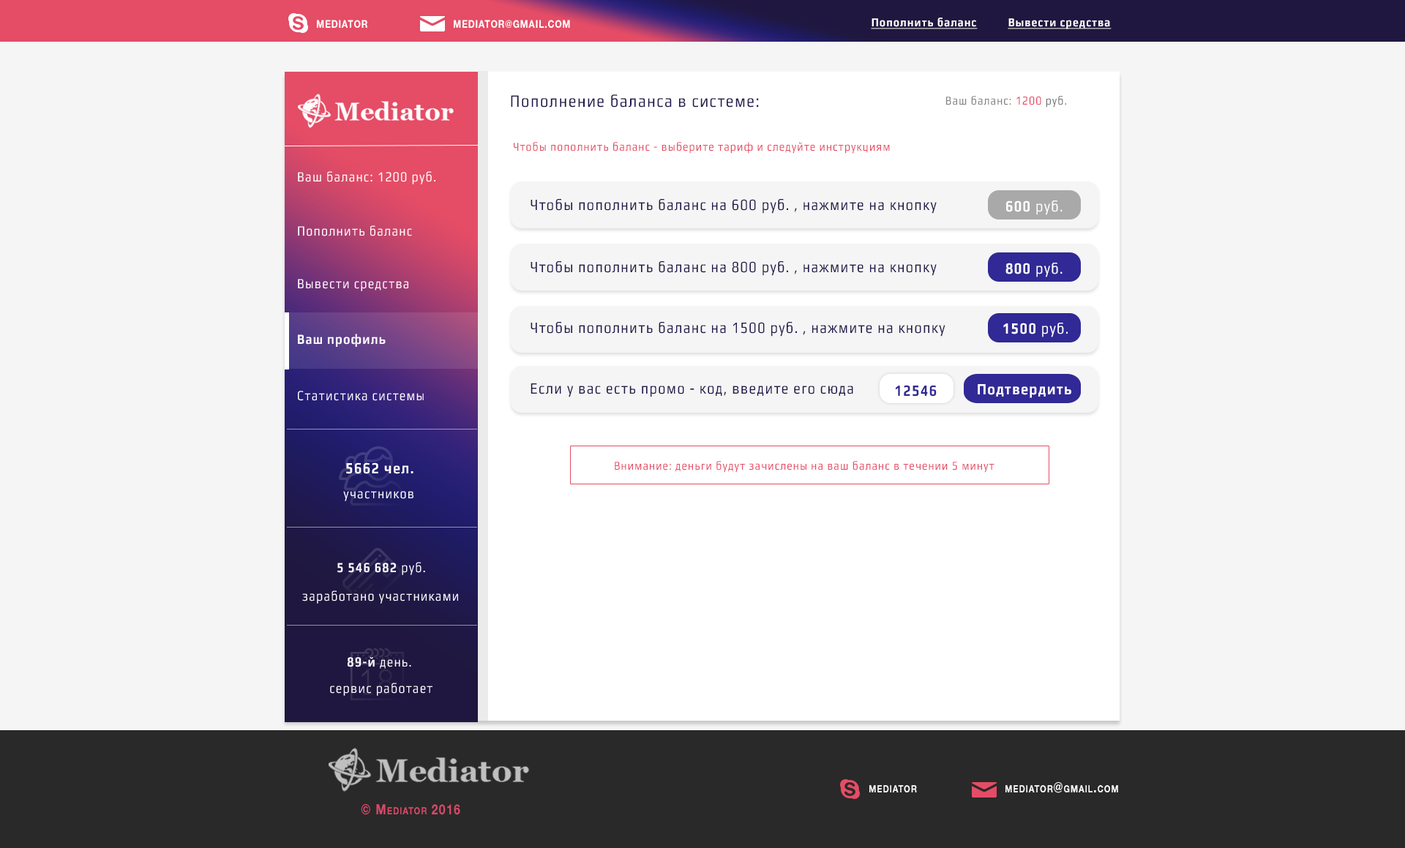
<style>
.page{position:relative;width:1405px;height:848px;background:#f5f5f5}
.page>*{position:absolute;margin:0}
.t1{font:12.3px "Play-Bold";letter-spacing:0.075em;color:#ffffff;text-decoration:underline;scale:0.83 1}
.t2{font:10.5px "HelveticaNeueCyr-Bold";letter-spacing:0.075em;color:#ffffff;scale:0.83 1}
.t3{font:17.6px "Play";letter-spacing:0.075em;color:#1f194a;scale:0.83 1}
.t4{font:12.3px "Play";letter-spacing:0.075em;color:#808080;scale:0.83 1}
.t5{font:12.3px "Play";letter-spacing:0.075em;color:#e54c65;scale:0.83 1}
.t6{font:12.3px "Play";letter-spacing:0.075em;color:#717171;scale:0.83 1}
.t7{font:14.1px "Play";letter-spacing:0.075em;color:#ffffff;scale:0.83 1}
.t8{font:15.8px "Play";letter-spacing:0.075em;color:#1f194a;scale:0.83 1}
.t9{font:15.8px "Play";letter-spacing:0.075em;color:#ffffff;scale:0.83 1}
.t10{font:15.8px "Play-Bold";letter-spacing:0.075em;color:#ffffff;scale:0.83 1}
.t11{font:14.1px "Play-Bold";letter-spacing:0.075em;color:#ffffff;scale:0.83 1}
.t12{font:15.8px "Play-Bold";letter-spacing:0.075em;color:#312995;scale:0.83 1}
.t13{font:14.1px "HelveticaNeueCyr-Bold";letter-spacing:0.075em;color:#ffffff;font-variant:small-caps;scale:0.83 1}
.t14{font:14.1px "HelveticaNeueCyr-Bold";letter-spacing:0.075em;color:#d64968;font-variant:small-caps;scale:0.83 1}
</style>
<div class="page">
<p class="t1" style="left:871px;top:18px;width:107px;height:11px">Пополнить баланс</p>
<p class="t2" style="left:317px;top:20px;width:50px;height:8px">MEDIATOR</p>
<p class="t2" style="left:454px;top:20px;width:116px;height:8px">MEDIATOR@GMAIL.COM</p>
<p class="t1" style="left:1008px;top:18px;width:104px;height:11px">Вывести средства</p>
<p class="t3" style="left:511px;top:94px;width:248px;height:14px">Пополнение баланса в системе:</p>
<p class="t4" style="left:947px;top:96px;width:120px;height:12px">Ваш баланс: <span class="t5">1200 </span><span class="t6">руб.</span></p>
<p class="t5" style="left:514px;top:142px;width:376px;height:12px">Чтобы пополнить баланс - выберите тариф и следуйте инструкциям</p>
<p class="t7" style="left:298px;top:171px;width:138px;height:13px">Ваш баланс: 1200 руб.</p>
<p class="t8" style="left:531px;top:199px;width:406px;height:15px">Чтобы пополнить баланс на 600 руб. , нажмите на кнопку</p>
<p class="t9" style="left:1007px;top:201px;width:56px;height:14px"><span class="t10">600 </span>руб.</p>
<p class="t7" style="left:298px;top:225px;width:114px;height:11px">Пополнить баланс</p>
<p class="t8" style="left:531px;top:261px;width:406px;height:15px">Чтобы пополнить баланс на 800 руб. , нажмите на кнопку</p>
<p class="t9" style="left:1006px;top:263px;width:57px;height:14px"><span class="t10">800 </span>руб.</p>
<p class="t7" style="left:298px;top:279px;width:110px;height:12px">Вывести средства</p>
<p class="t8" style="left:531px;top:322px;width:415px;height:15px">Чтобы пополнить баланс на 1500 руб. , нажмите на кнопку</p>
<p class="t10" style="left:1004px;top:323px;width:64px;height:14px">1500 <span class="t9">руб.</span></p>
<p class="t11" style="left:298px;top:334px;width:88px;height:13px">Ваш профиль</p>
<p class="t8" style="left:531px;top:384px;width:323px;height:13px">Если у вас есть промо - код, введите его сюда</p>
<p class="t12" style="left:896px;top:385px;width:41px;height:12px">12546</p>
<p class="t10" style="left:978px;top:384px;width:94px;height:14px">Подтвердить</p>
<p class="t7" style="left:298px;top:391px;width:126px;height:10px">Статистика системы</p>
<p class="t5" style="left:615px;top:461px;width:380px;height:12px">Внимание: деньги будут зачислены на ваш баланс в течении 5 минут</p>
<p class="t10" style="left:346px;top:463px;width:68px;height:11px">5662 чел.</p>
<p class="t7" style="left:343px;top:491px;width:71px;height:10px">участников</p>
<p class="t11" style="left:337px;top:562px;width:88px;height:13px">5 546 682<span class="t7"> руб.</span></p>
<p class="t7" style="left:302px;top:591px;width:156px;height:13px">заработано участниками</p>
<p class="t7" style="left:348px;top:657px;width:63px;height:12px"><span class="t11">89-й</span> день.</p>
<p class="t7" style="left:330px;top:683px;width:103px;height:13px">сервис работает</p>
<p class="t13" style="left:870px;top:785px;width:47px;height:8px">mediator</p>
<p class="t13" style="left:1006px;top:783px;width:113px;height:11px">mediator@gmail.com</p>
<p class="t14" style="left:361px;top:804px;width:99px;height:11px">© Mediator 2016</p>
</div>
